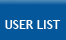
<style>
.page{position:relative;width:66px;height:40px;background:#04579b}
.page>*{position:absolute;margin:0}
.t1{font:12px "TrebuchetMS-Bold";color:#ffffff}
</style>
<div class="page">
<p class="t1" style="left:5px;top:20px;width:56px;height:9px">HOME  USER LIST   LOGOUT</p>
</div>
